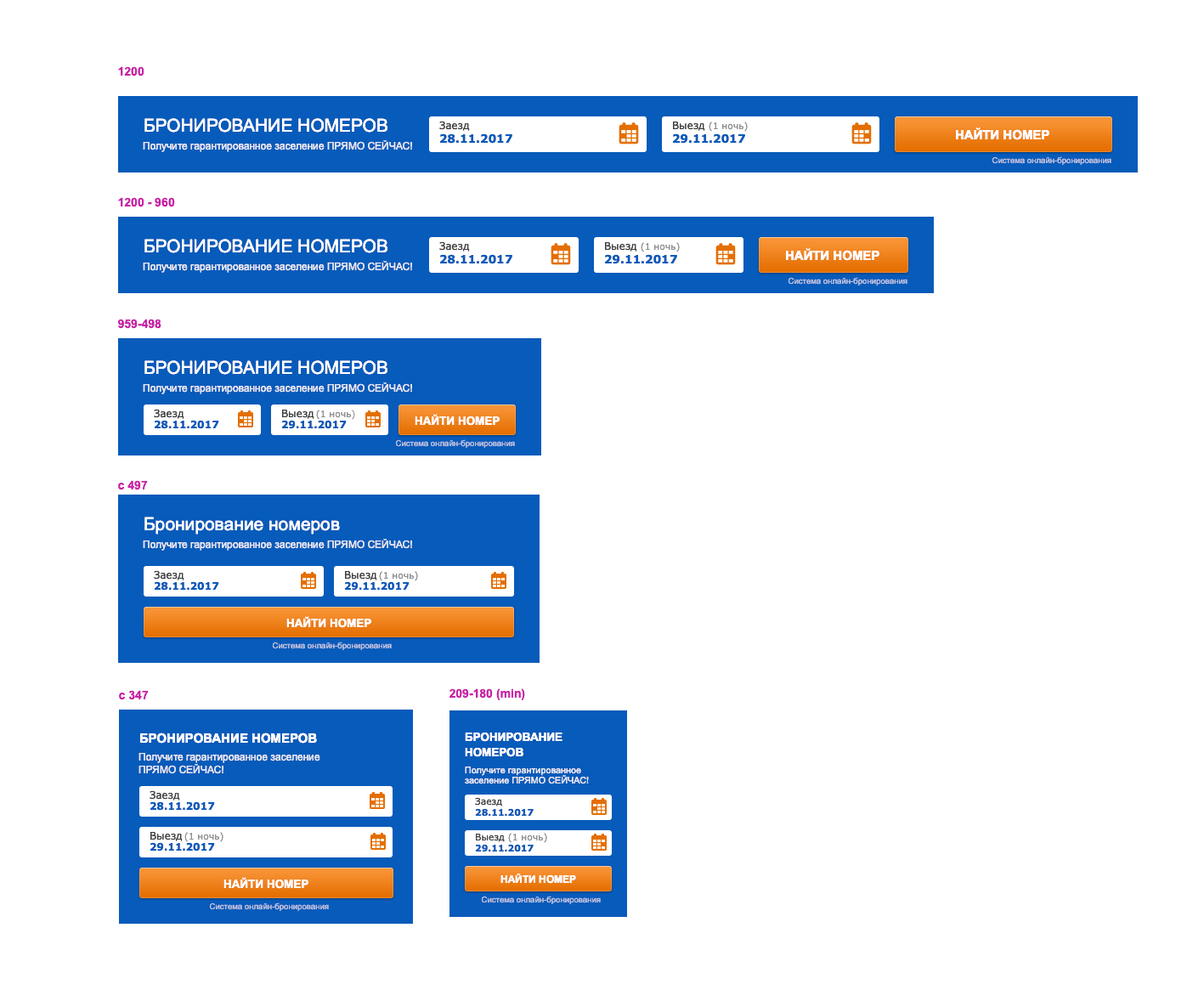
<style>
.page{position:relative;width:1204px;height:990px;background:#ffffff}
.page>*{position:absolute;margin:0}
.t1{font:11.9px "Arial-BoldMT";color:#ca21a8}
.t2{font:17.8px "ArialMT";color:#ffffff;text-transform:uppercase}
.t3{font:10.2px "Verdana";color:#3d3d3d}
.t4{font:9.2px "Verdana";color:#8e8e8e}
.t5{font:11.5px "Verdana-Bold";color:#075bba}
.t6{font:12.7px "Arial-BoldMT";color:#ffffff;text-transform:uppercase}
.t7{font:10.2px "ArialMT";color:#e4e8f3}
.t8{font:8.2px "ArialMT";color:#b5c0df}
.t9{font:11.5px "Arial-BoldMT";color:#ffffff;text-transform:uppercase}
.t10{font:10.2px "Verdana-Bold";color:#075bba}
.t11{font:17.8px "ArialMT";color:#ffffff}
.t12{font:11.5px/15.3px "Arial-BoldMT";color:#ffffff;text-transform:uppercase}
.t13{font:10.2px/12.7px "ArialMT";color:#e4e8f3}
.t14{font:9.2px/10.2px "ArialMT";color:#e4e8f3}
.t15{font:9.2px "Verdana";color:#3d3d3d}
.t16{font:9.2px "Verdana-Bold";color:#075bba}
.t17{font:10.2px "Arial-BoldMT";color:#ffffff;text-transform:uppercase}
</style>
<div class="page">
<p class="t1" style="left:118px;top:66px;width:26px;height:10px">1200</p>
<p class="t2" style="left:144px;top:118px;width:244px;height:15px">Бронирование номеров</p>
<p class="t3" style="left:439px;top:121px;width:31px;height:10px">Заезд</p>
<p class="t3" style="left:673px;top:122px;width:32px;height:9px">Выезд</p>
<p class="t4" style="left:709px;top:122px;width:39px;height:10px">(1 ночь)</p>
<p class="t5" style="left:440px;top:133px;width:72px;height:11px">28.11.2017</p>
<p class="t5" style="left:673px;top:133px;width:72px;height:11px">29.11.2017</p>
<p class="t6" style="left:956px;top:127px;width:94px;height:13px">Найти номер</p>
<p class="t7" style="left:143px;top:140px;width:269px;height:12px">Получите гарантированное заселение ПРЯМО СЕЙЧАС!</p>
<p class="t8" style="left:992px;top:156px;width:120px;height:9px">Cистема онлайн-бронирования</p>
<p class="t1" style="left:118px;top:197px;width:57px;height:10px">1200 - 960</p>
<p class="t2" style="left:144px;top:239px;width:244px;height:14px">Бронирование номеров</p>
<p class="t3" style="left:439px;top:241px;width:31px;height:11px">Заезд</p>
<p class="t3" style="left:605px;top:242px;width:32px;height:10px">Выезд</p>
<p class="t4" style="left:641px;top:242px;width:39px;height:10px">(1 ночь)</p>
<p class="t5" style="left:440px;top:254px;width:72px;height:10px">28.11.2017</p>
<p class="t5" style="left:605px;top:254px;width:72px;height:10px">29.11.2017</p>
<p class="t6" style="left:786px;top:248px;width:94px;height:13px">Найти номер</p>
<p class="t7" style="left:143px;top:261px;width:269px;height:12px">Получите гарантированное заселение ПРЯМО СЕЙЧАС!</p>
<p class="t8" style="left:788px;top:277px;width:120px;height:9px">Cистема онлайн-бронирования</p>
<p class="t1" style="left:118px;top:319px;width:43px;height:10px">959-498</p>
<p class="t2" style="left:144px;top:360px;width:244px;height:15px">Бронирование номеров</p>
<p class="t7" style="left:143px;top:382px;width:269px;height:12px">Получите гарантированное заселение ПРЯМО СЕЙЧАС!</p>
<p class="t3" style="left:154px;top:409px;width:30px;height:10px">Заезд</p>
<p class="t3" style="left:282px;top:410px;width:32px;height:9px">Выезд</p>
<p class="t4" style="left:316px;top:410px;width:39px;height:10px">(1 ночь)</p>
<p class="t9" style="left:415px;top:414px;width:85px;height:12px">Найти номер</p>
<p class="t10" style="left:155px;top:420px;width:64px;height:9px">28.11.2017</p>
<p class="t10" style="left:282px;top:420px;width:65px;height:9px">29.11.2017</p>
<p class="t8" style="left:395px;top:439px;width:120px;height:9px">Cистема онлайн-бронирования</p>
<p class="t1" style="left:118px;top:480px;width:30px;height:10px">с 497</p>
<p class="t11" style="left:144px;top:517px;width:196px;height:18px">Бронирование номеров</p>
<p class="t7" style="left:143px;top:539px;width:269px;height:12px">Получите гарантированное заселение ПРЯМО СЕЙЧАС!</p>
<p class="t3" style="left:154px;top:570px;width:30px;height:10px">Заезд</p>
<p class="t10" style="left:155px;top:581px;width:64px;height:10px">28.11.2017</p>
<p class="t10" style="left:345px;top:581px;width:65px;height:10px">29.11.2017</p>
<p class="t3" style="left:345px;top:571px;width:32px;height:9px">Выезд</p>
<p class="t4" style="left:379px;top:571px;width:39px;height:10px">(1 ночь)</p>
<p class="t9" style="left:286px;top:616px;width:85px;height:12px">Найти номер</p>
<p class="t8" style="left:272px;top:642px;width:120px;height:8px">Cистема онлайн-бронирования</p>
<p class="t1" style="left:450px;top:688px;width:75px;height:12px">209-180 (min)</p>
<p class="t1" style="left:119px;top:690px;width:30px;height:10px">с 347</p>
<p class="t6" style="left:140px;top:733px;width:177px;height:11px">Бронирование номеров</p>
<p class="t12" style="left:465px;top:733px;width:98px;height:24px">Бронирование <br>номеров</p>
<p class="t13" style="left:139px;top:753px;width:181px;height:21px">Получите гарантированное заселение <br>ПРЯМО СЕЙЧАС!</p>
<p class="t14" style="left:465px;top:767px;width:124px;height:17px">Получите гарантированное<br>заселение ПРЯМО СЕЙЧАС!</p>
<p class="t3" style="left:150px;top:790px;width:30px;height:11px">Заезд</p>
<p class="t15" style="left:475px;top:797px;width:27px;height:10px">Заезд</p>
<p class="t10" style="left:150px;top:801px;width:65px;height:10px">28.11.2017</p>
<p class="t16" style="left:475px;top:808px;width:59px;height:9px">28.11.2017</p>
<p class="t3" style="left:150px;top:832px;width:33px;height:9px">Выезд</p>
<p class="t4" style="left:184px;top:832px;width:40px;height:10px">(1 ночь)</p>
<p class="t15" style="left:476px;top:834px;width:29px;height:8px">Выезд</p>
<p class="t4" style="left:508px;top:833px;width:39px;height:10px">(1 ночь)</p>
<p class="t10" style="left:150px;top:842px;width:65px;height:10px">29.11.2017</p>
<p class="t16" style="left:475px;top:844px;width:59px;height:8px">29.11.2017</p>
<p class="t9" style="left:224px;top:877px;width:85px;height:12px">Найти номер</p>
<p class="t17" style="left:501px;top:874px;width:75px;height:10px">Найти номер</p>
<p class="t8" style="left:209px;top:903px;width:120px;height:8px">Cистема онлайн-бронирования</p>
<p class="t8" style="left:481px;top:896px;width:120px;height:8px">Cистема онлайн-бронирования</p>
</div>
